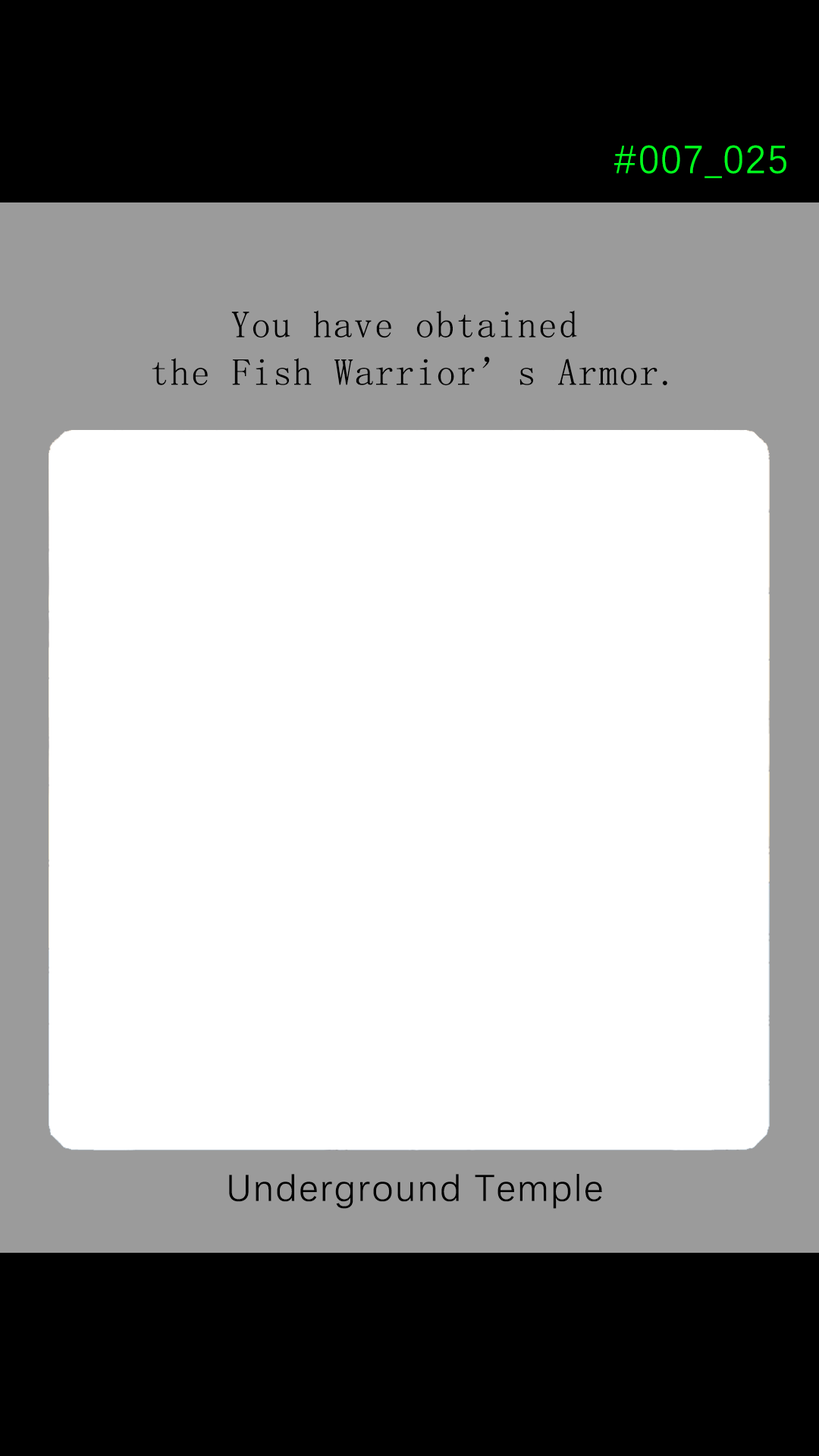
<style>
.page{position:relative;width:819px;height:1456px;background:#ffffff}
.page>*{position:absolute;margin:0}
.t1{font:39.2px "DengXian-Regular";letter-spacing:0.04em;color:#00ff1e}
.t2{font:37.9px/47.6px "SimSun";letter-spacing:0.04em;color:#000000}
.t3{font:37.9px "DengXian-Regular";letter-spacing:0.04em;color:#000000}
</style>
<div class="page">
<p class="t1" style="left:614px;top:145px;width:172px;height:33px">#007_025</p>
<p class="t2" style="left:152px;top:310px;width:515px;height:76px;text-align:center">You have obtained <br>the Fish Warrior’s Armor.</p>
<p class="t3" style="left:229px;top:1174px;width:373px;height:35px">Underground Temple</p>
</div>
